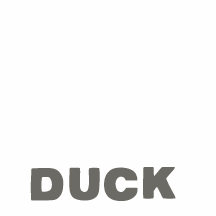
<style>
.page{position:relative;width:216px;height:216px;background:#fefefe}
.page>*{position:absolute;margin:0}
.t1{font:36px "AZPostcard";color:#6c6a64;font-weight:bold}
</style>
<div class="page">
<p class="t1" style="left:30px;top:167px;width:146px;height:34px">DUCK</p>
</div>
